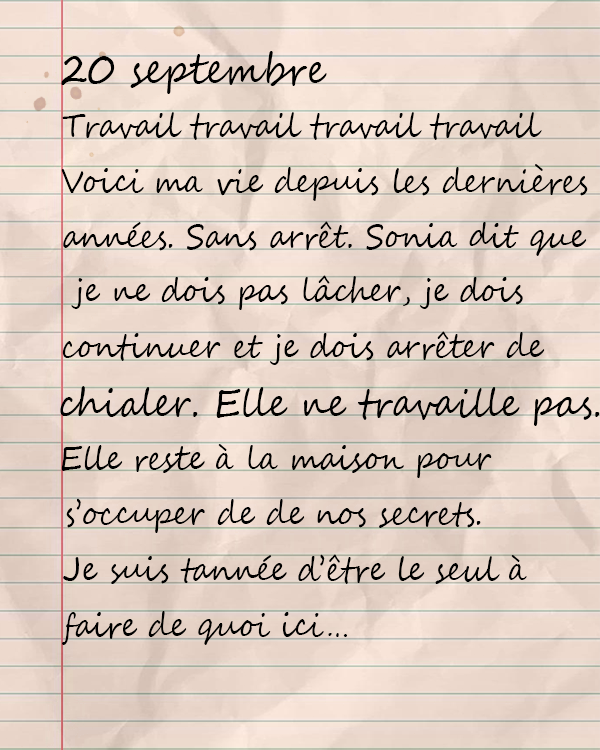
<style>
.page{position:relative;width:600px;height:750px}
.page>*{position:absolute;margin:0}
.t1{font:41.8px "SegoeScript";color:#000000;scale:0.9 1}
.t2{font:33.3px "SegoeScript";color:#000000;scale:0.9 1}
</style>
<div class="page">
<p class="t1" style="left:61px;top:51px;width:266px;height:43px">20 septembre</p>
<p class="t2" style="left:62px;top:112px;width:480px;height:28px">Travail travail travail travail</p>
<p class="t2" style="left:61px;top:164px;width:527px;height:37px">Voici ma vie depuis les dernières</p>
<p class="t2" style="left:63px;top:221px;width:524px;height:35px">années. Sans arrêt. Sonia dit que</p>
<p class="t2" style="left:71px;top:275px;width:452px;height:35px">je ne dois pas lâcher, je dois</p>
<p class="t2" style="left:62px;top:331px;width:483px;height:34px">continuer et je dois arrêter de</p>
<p class="t2" style="left:60px;top:386px;width:540px;height:40px">chialer. Elle ne travaille pas.</p>
<p class="t2" style="left:61px;top:444px;width:431px;height:34px">Elle reste à la maison pour</p>
<p class="t2" style="left:66px;top:498px;width:415px;height:35px">s’occuper de de nos secrets.</p>
<p class="t2" style="left:63px;top:554px;width:464px;height:30px">Je suis tannée d’être le seul à</p>
<p class="t2" style="left:62px;top:611px;width:285px;height:34px">faire de quoi ici…</p>
</div>
